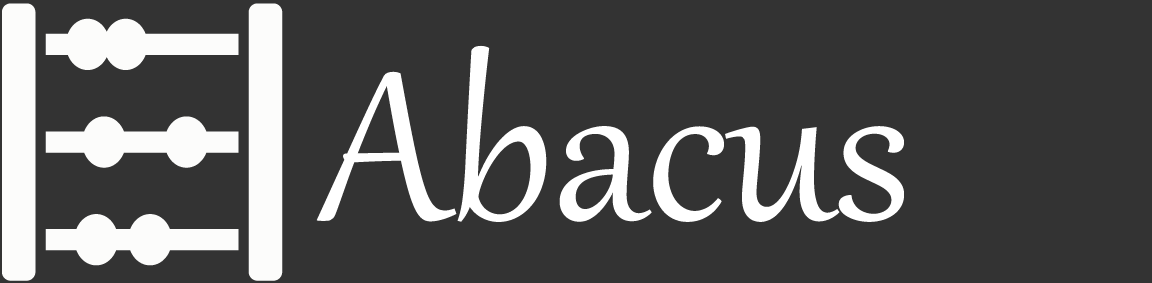
<style>
.page{position:relative;width:1152px;height:283px;background:#333333}
.page>*{position:absolute;margin:0}
.t1{font:260px "Gabriola";color:#ffffff}
</style>
<div class="page">
<p class="t1" style="left:316px;top:45px;width:588px;height:177px">Abacus</p>
</div>
